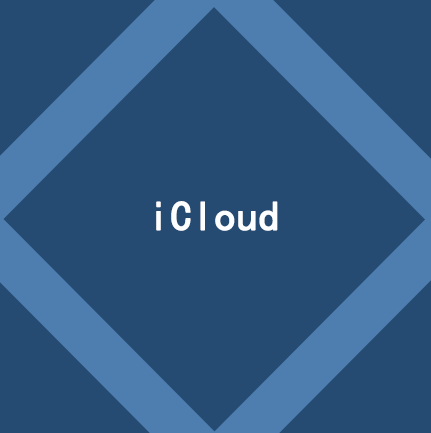
<style>
.page{position:relative;width:431px;height:433px;background:#254b72}
.page>*{position:absolute;margin:0}
.t1{font:41.4px "SimHei";color:#fdfeff;font-weight:bold}
.t2{font:41.4px "SimHei";color:#514664;font-weight:bold}
</style>
<div class="page">
<p class="t1" style="left:156px;top:201px;width:122px;height:30px"><span class="t2">      </span>iCloud</p>
</div>
